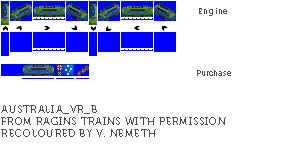
<style>
.page{position:relative;width:300px;height:159px;background:#ffffff}
.page>*{position:absolute;margin:0}
.t1{font:8px "Museo700-Regular";letter-spacing:0.075em;color:#444c5c}
.t2{font:8px "Museo700-Regular";color:#444c5c}
.t3{font:10px "Museo700-Regular";letter-spacing:0.075em;color:#444c5c;text-transform:uppercase}
</style>
<div class="page">
<p class="t1" style="left:199px;top:8px;width:28px;height:8px">Engine</p>
<p class="t2" style="left:197px;top:70px;width:34px;height:6px">Purchase</p>
<p class="t3" style="left:1px;top:105px;width:225px;height:32px">Australia_VR_B<br>from ragins trains with permission<br>RECOLOURED BY v. nemeth</p>
</div>
